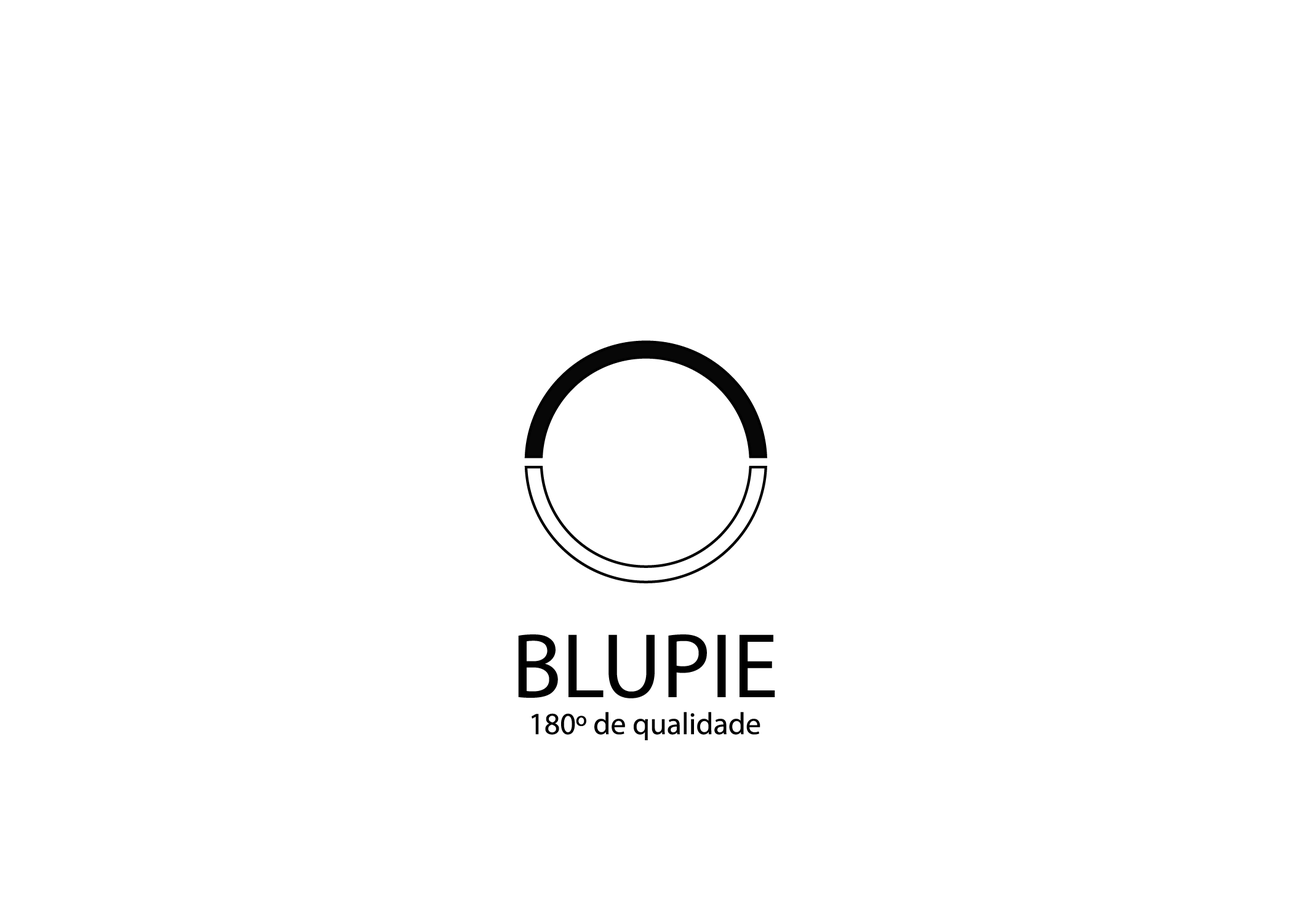
<style>
.page{position:relative;width:1292px;height:923px;background:#ffffff}
.page>*{position:absolute;margin:0}
.t1{font:30.8px "MyriadPro-Regular";color:#000000}
.t2{font:92.3px "MyriadPro-Regular";color:#000000}
</style>
<div class="page">
<p class="t1" style="left:518px;top:634px;width:257px;height:106px;text-align:center"><span class="t2">BLUPIE<br></span>180º de qualidade</p>
</div>
